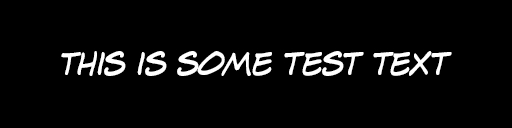
<style>
.page{position:relative;width:512px;height:128px;background:#000000}
.page>*{position:absolute;margin:0}
.t1{font:33.3px "LintMcCreeIntlBB-Italic";letter-spacing:-0.05em;color:#ffffff}
</style>
<div class="page">
<p class="t1" style="left:61px;top:51px;width:391px;height:25px">This is some test text</p>
</div>
